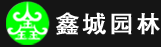
<style>
.page{position:relative;width:161px;height:47px;background:#151515}
.page>*{position:absolute;margin:0}
.t1{font:24px "FZHTJW--GB1-0";letter-spacing:0.1em;color:#ffffff;font-weight:bold}
</style>
<div class="page">
<p class="t1" style="left:56px;top:12px;width:104px;height:23px">鑫城园林</p>
</div>
